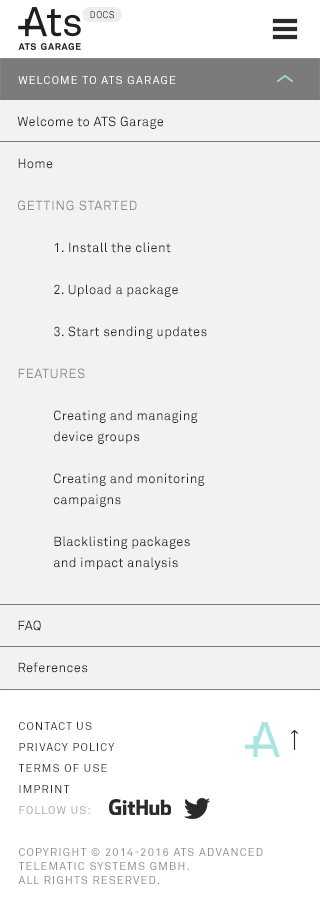
<style>
.page{position:relative;width:320px;height:915px;background:#f2f2f2}
.page>*{position:absolute;margin:0}
.t1{font:9.5px "AkkuratStd-Mono";letter-spacing:0.05em;color:#2b2b2b;text-transform:uppercase}
.t2{font:11px "AkkuratStd";letter-spacing:0.1em;color:#ffffff;text-transform:uppercase}
.t3{font:13px/21px "AkkuratStd";letter-spacing:0.025em;color:#2b2b2b}
.t4{font:13px/21px "AkkuratStd";letter-spacing:0.05em;color:#8e8e8e;text-transform:uppercase}
.t5{font:11px/14px "AkkuratStd";letter-spacing:0.1em;color:#8e8e8e;text-transform:uppercase}
.t6{font:11px/21px "AkkuratStd";letter-spacing:0.1em;color:#2b2b2b;text-transform:uppercase}
.t7{font:11px/21px "AkkuratStd";letter-spacing:0.1em;color:#a4a4a4;text-transform:uppercase}
</style>
<div class="page">
<p class="t1" style="left:90px;top:11px;width:24px;height:8px">Docs</p>
<p class="t2" style="left:18px;top:76px;width:158px;height:8px">welcome to ats garage</p>
<p class="t3" style="left:17px;top:116px;width:190px;height:557px">Welcome to ATS Garage<br><br>Home<br><br><span class="t4">Getting Started<br></span><br> 1. Install the client<br><br> 2. Upload a package<br><br> 3. Start sending updates<br><br><span class="t4">Features<br></span><br> Creating and managing <br> device groups<br><br> Creating and monitoring <br> campaigns<br><br> Blacklisting packages <br> and impact analysis<br><br><br>FAQ<br><br>References</p>
<p class="t5" style="left:18px;top:722px;width:245px;height:162px"><span class="t6">contact us<br>Privacy Policy<br>Terms of Use<br>imprint<br></span><span class="t7">follow us:<br></span><br><br>Copyright © 2014-2016 ATS Advanced telematic systems gmbh. <br>All rights reserved.</p>
</div>
